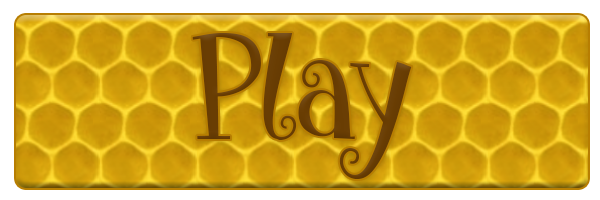
<style>
.page{position:relative;width:600px;height:200px}
.page>*{position:absolute;margin:0}
.t1{font:146.5px "give_me_some_sugar";color:#693d03}
</style>
<div class="page">
<p class="t1" style="left:192px;top:33px;width:220px;height:146px">Play</p>
</div>
